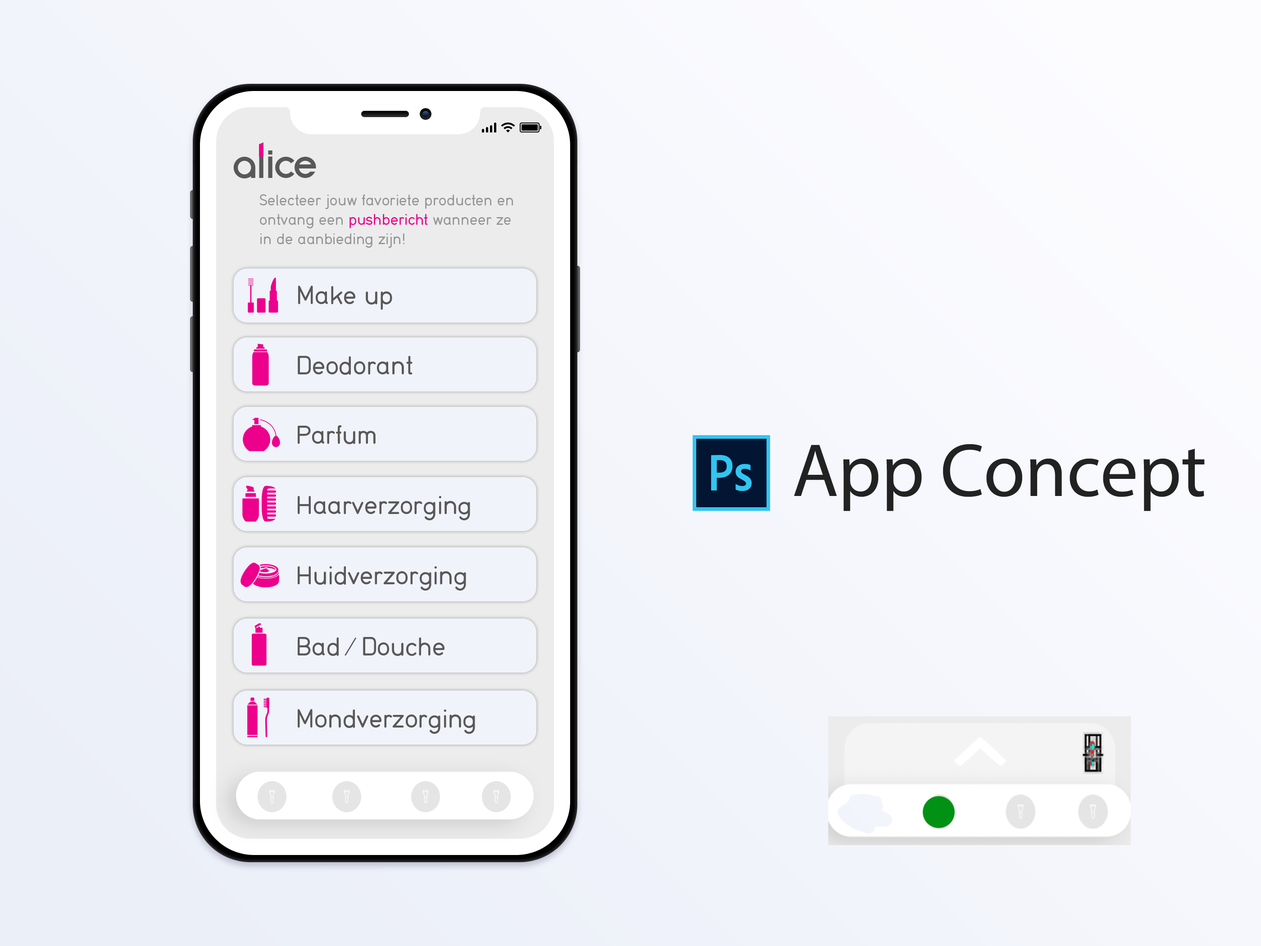
<style>
.page{position:relative;width:1261px;height:946px}
.page>*{position:absolute;margin:0}
.t1{font:40.7px "AquaGrotesque";letter-spacing:-0.075em;color:#595758}
.t2{font:40.7px "AquaGrotesque";letter-spacing:-0.1em;color:#595758}
.t3{font:40.7px "AquaGrotesque";letter-spacing:-0.15em;color:#595758}
.t4{font:16.2px "Din16-Normal";letter-spacing:0.01em;color:#959494}
.t5{font:16.2px "Din16-Normal";letter-spacing:0.01em;color:#ec008c}
.t6{font:27px "Din16-Normal";letter-spacing:0.01em;color:#595758}
.t7{font:75.7px "MyriadPro-Regular";color:#222222}
</style>
<div class="page">
<p class="t1" style="left:233px;top:142px;width:83px;height:36px">al<span class="t2">i</span><span class="t3">ce</span></p>
<p class="t4" style="left:259px;top:194px;width:254px;height:54px">Selecteer jouw favoriete producten en<br>ontvang een <span class="t5">pushbericht</span> wanneer ze<br>in de aanbieding zijn!</p>
<p class="t6" style="left:298px;top:286px;width:94px;height:24px">Make up</p>
<p class="t6" style="left:298px;top:356px;width:114px;height:19px">Deodorant</p>
<p class="t6" style="left:298px;top:425px;width:78px;height:19px">Parfum</p>
<p class="t7" style="left:794px;top:444px;width:411px;height:67px">App Concept</p>
<p class="t6" style="left:298px;top:496px;width:172px;height:24px">Haarverzorging</p>
<p class="t6" style="left:298px;top:566px;width:168px;height:24px">Huidverzorging</p>
<p class="t6" style="left:298px;top:637px;width:146px;height:19px">Bad / Douche</p>
<p class="t6" style="left:298px;top:709px;width:177px;height:25px">Mondverzorging</p>
</div>
